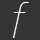
<style>
.page{position:relative;width:40px;height:40px;background:#333333}
.page>*{position:absolute;margin:0}
.t1{font:51.4px "HelveticaNeue-UltraLightItalic";letter-spacing:-0.26em;color:#ffffff}
</style>
<div class="page">
<p class="t1" style="left:12px;top:2px;width:17px;height:36px">f</p>
</div>
